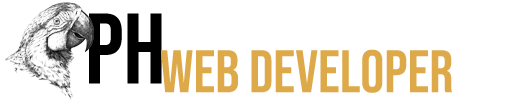
<style>
.page{position:relative;width:529px;height:100px;background:#ffffff}
.page>*{position:absolute;margin:0}
.t1{font:100px "BebasNeue-Regular";color:#000000}
.t2{font:60px "BebasNeue-Regular";color:#dea948}
</style>
<div class="page">
<p class="t1" style="left:89px;top:13px;width:73px;height:71px">PH</p>
<p class="t2" style="left:161px;top:49px;width:291px;height:44px">web developer</p>
</div>
